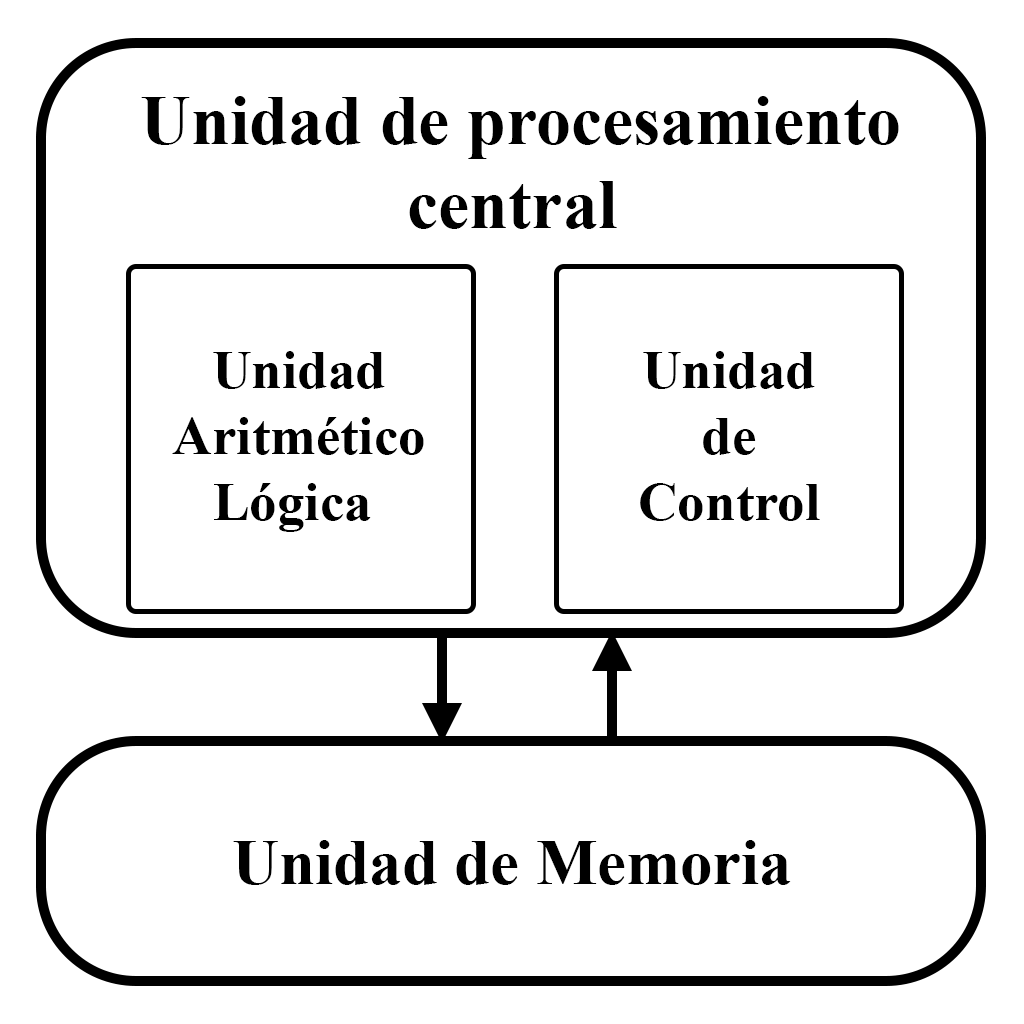
<style>
.page{position:relative;width:1024px;height:1024px;background:#ffffff}
.page>*{position:absolute;margin:0}
.t1{font:70px "TimesNewRomanPS-BoldMT";color:#000000}
.t2{font:55px "TimesNewRomanPS-BoldMT";color:#000000}
.t3{font:65px "TimesNewRomanPS-BoldMT";color:#000000}
</style>
<div class="page">
<p class="t1" style="left:141px;top:96px;width:758px;height:133px;text-align:center">Unidad de procesamiento <br>central</p>
<p class="t2" style="left:172px;top:351px;width:252px;height:181px;text-align:center">Unidad <br>Aritmético <br>Lógica</p>
<p class="t2" style="left:640px;top:351px;width:180px;height:170px;text-align:center">Unidad <br>de <br>Control</p>
<p class="t3" style="left:233px;top:840px;width:558px;height:45px">Unidad de Memoria</p>
</div>
